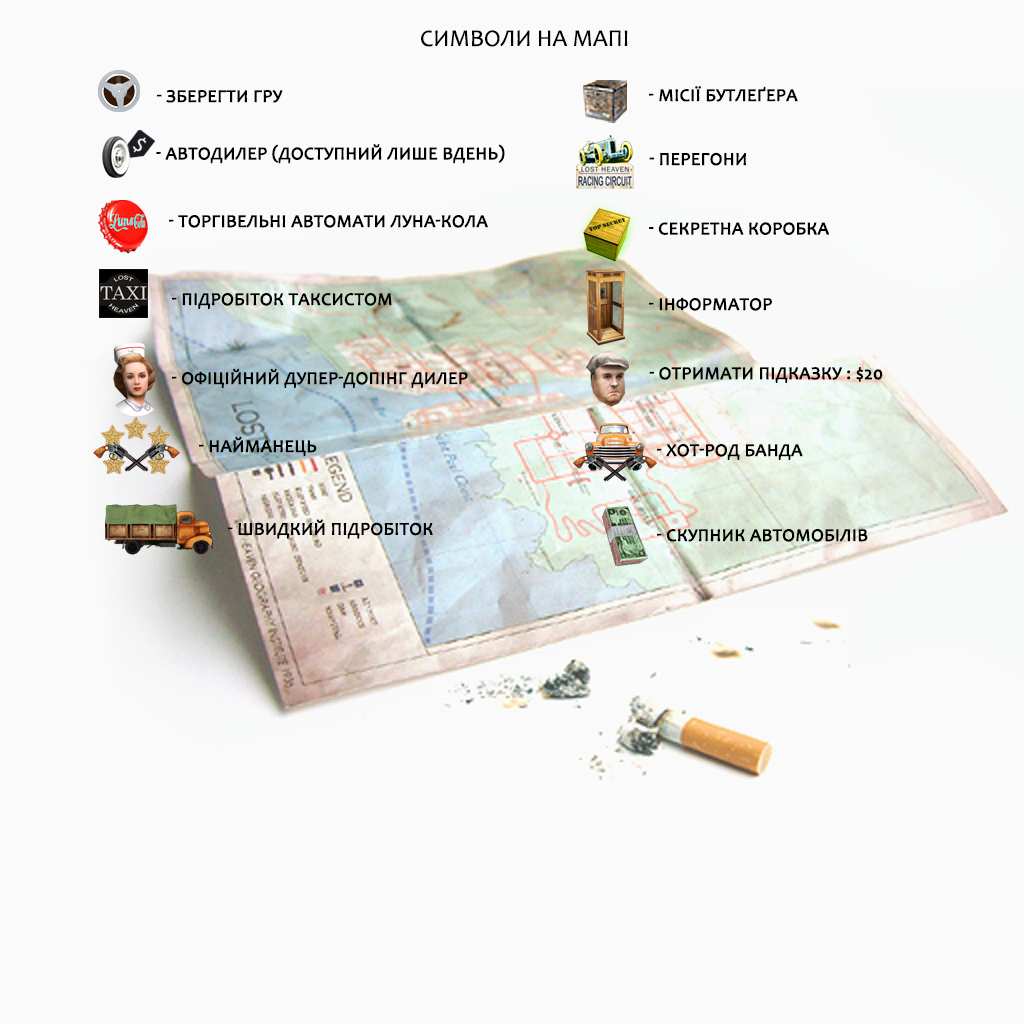
<style>
.page{position:relative;width:1024px;height:1024px;background:#fafafa}
.page>*{position:absolute;margin:0}
.t1{font:24px "Candara";color:#000000;text-transform:uppercase}
.t2{font:18px "Candara";color:#000000;text-transform:uppercase;font-weight:bold}
</style>
<div class="page">
<p class="t1" style="left:421px;top:30px;width:207px;height:17px">Символи на мапі</p>
<p class="t2" style="left:649px;top:86px;width:149px;height:16px">- місії бутлеґера</p>
<p class="t2" style="left:156px;top:90px;width:127px;height:13px">- Зберегти гру</p>
<p class="t2" style="left:156px;top:144px;width:349px;height:20px">- автодилер (доступний лише вдень)</p>
<p class="t2" style="left:649px;top:152px;width:97px;height:14px">- перегони</p>
<p class="t2" style="left:169px;top:215px;width:319px;height:13px">- торгівельні автомати Луна-кола</p>
<p class="t2" style="left:649px;top:222px;width:180px;height:13px">- секретна коробка</p>
<p class="t2" style="left:172px;top:293px;width:220px;height:16px">- підробіток таксистом</p>
<p class="t2" style="left:649px;top:297px;width:123px;height:14px">- інформатор</p>
<p class="t2" style="left:172px;top:368px;width:296px;height:20px">- офіційний дупер-допінг дилер</p>
<p class="t2" style="left:649px;top:367px;width:234px;height:16px">- Отримати підказку : $20</p>
<p class="t2" style="left:199px;top:436px;width:118px;height:20px">- найманець</p>
<p class="t2" style="left:657px;top:444px;width:146px;height:16px">- хот-род банда</p>
<p class="t2" style="left:228px;top:519px;width:205px;height:20px">- Швидкий підробіток</p>
<p class="t2" style="left:657px;top:529px;width:211px;height:13px">- скупник автомобілів</p>
</div>
